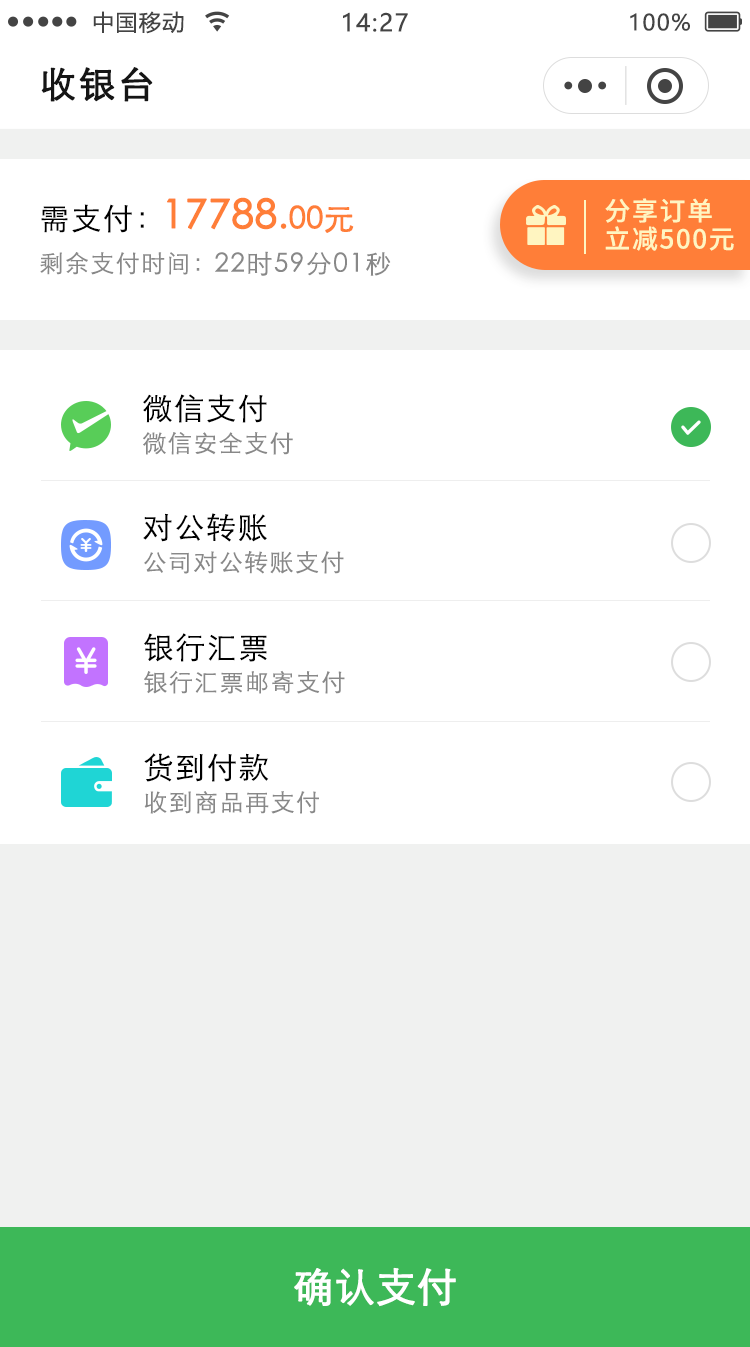
<style>
.page{position:relative;width:750px;height:1347px;background:#ffffff}
.page>*{position:absolute;margin:0}
.t1{font:22px "MicrosoftYaHei";letter-spacing:0.06em;color:#444444}
.t2{font:24px "MicrosoftYaHei";letter-spacing:0.06em;color:#444444}
.t3{font:36px "STXihei";letter-spacing:0.06em;color:#151515;font-weight:bold}
.t4{font:40px "STXihei";color:#ff7e38;font-weight:bold}
.t5{font:36px "STXihei";color:#ff7e38;font-weight:bold}
.t6{font:30px "STXihei";color:#ff7e38;font-weight:bold}
.t7{font:26px/28px "NotoSansCJKsc-Medium";letter-spacing:0.06em;color:#fff5c1}
.t8{font:30px "STXihei";letter-spacing:0.06em;color:#000000}
.t9{font:24px "STXihei";letter-spacing:0.06em;color:#888888}
.t10{font:26px "STXihei";letter-spacing:0.06em;color:#888888}
.t11{font:40px "STXihei";color:#ffffff;font-weight:bold}
</style>
<div class="page">
<p class="t1" style="left:93px;top:11px;width:91px;height:23px">中国移动</p>
<p class="t2" style="left:343px;top:12px;width:65px;height:20px">14:27</p>
<p class="t1" style="left:630px;top:13px;width:60px;height:18px">100%</p>
<p class="t3" style="left:41px;top:67px;width:112px;height:35px">收银台</p>
<p class="t4" style="left:167px;top:197px;width:187px;height:36px">17788<span class="t5">.</span><span class="t6">00元</span></p>
<p class="t7" style="left:605px;top:198px;width:129px;height:53px">分享订单<br>立减500元</p>
<p class="t8" style="left:41px;top:204px;width:103px;height:29px">需支付：</p>
<p class="t9" style="left:40px;top:252px;width:160px;height:23px">剩余支付时间：</p>
<p class="t10" style="left:215px;top:251px;width:176px;height:25px">22时59分01秒</p>
<p class="t8" style="left:143px;top:394px;width:124px;height:29px">微信支付</p>
<p class="t9" style="left:143px;top:432px;width:150px;height:23px">微信安全支付</p>
<p class="t8" style="left:143px;top:513px;width:124px;height:29px">对公转账</p>
<p class="t9" style="left:144px;top:551px;width:200px;height:23px">公司对公转账支付</p>
<p class="t8" style="left:144px;top:633px;width:123px;height:29px">银行汇票</p>
<p class="t9" style="left:144px;top:670px;width:201px;height:24px">银行汇票邮寄支付</p>
<p class="t8" style="left:144px;top:753px;width:125px;height:29px">货到付款</p>
<p class="t9" style="left:144px;top:791px;width:175px;height:23px">收到商品再支付</p>
<p class="t11" style="left:294px;top:1267px;width:162px;height:40px">确认支付</p>
</div>
